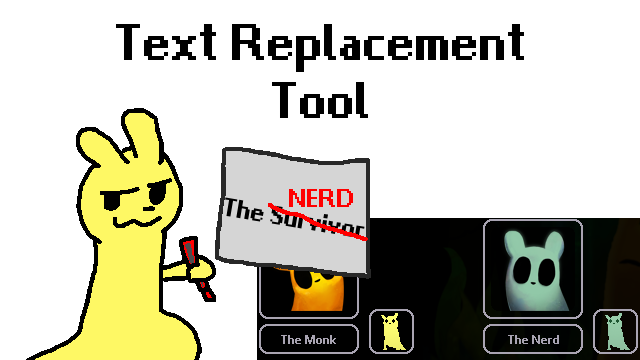
<style>
.page{position:relative;width:640px;height:360px;background:#ffffff}
.page>*{position:absolute;margin:0}
.t1{font:48px "rainworldmenufontwebfont";color:#000000}
.t2{font:24px "rainworldmenufontwebfont";color:#000000}
.t3{font:24px "rainworldmenufontwebfont";color:#ff0000}
</style>
<div class="page">
<p class="t1" style="left:116px;top:24px;width:408px;height:94px;text-align:center">Text Replacement<br>Tool</p>
<p class="t2" style="left:225px;top:197px;width:140px;height:41px;rotate:9deg">The Survivor</p>
<p class="t3" style="left:289px;top:189px;width:64px;height:18px">NERD</p>
</div>
